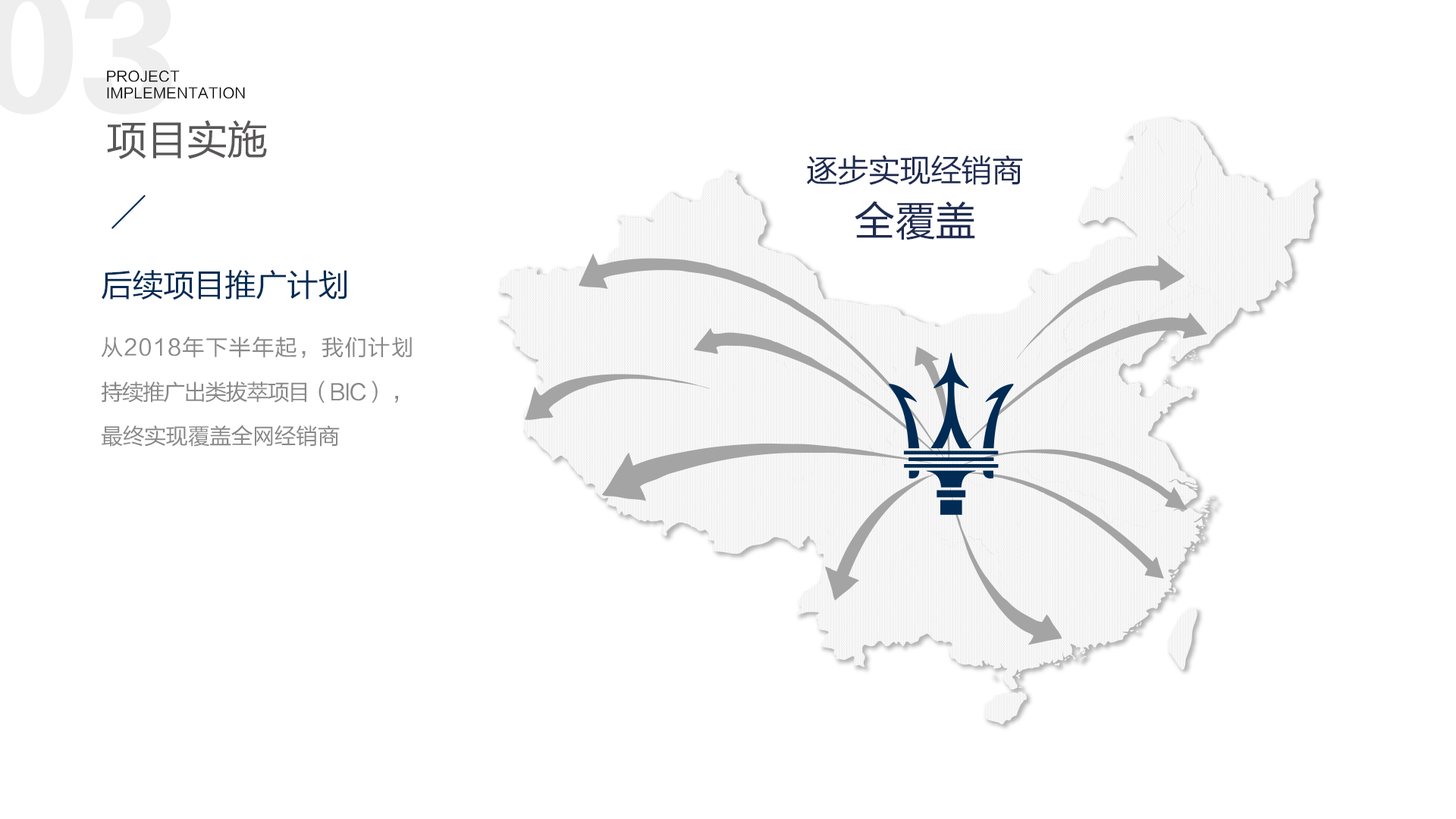
<style>
.page{position:relative;width:1456px;height:819px;background:#ffffff}
.page>*{position:absolute;margin:0}
.t1{font:14.1px "FZLTHJW--GB1-0";letter-spacing:0.02em;color:#000000}
.t2{font:41.1px "FZLTHJW--GB1-0";letter-spacing:-0.02em;color:#595757}
.t3{font:31.6px/53.7px "FZLTHJW--GB1-0";letter-spacing:-0.02em;color:#1f2b51}
.t4{font:41.1px/53.7px "FZLTHJW--GB1-0";letter-spacing:-0.02em;color:#1f2b51}
.t5{font:31.6px "FZLTHJW--GB1-0";letter-spacing:-0.02em;color:#002c54}
.t6{font:22.1px/44.2px "FZLTHJW--GB1-0";letter-spacing:-0.02em;color:#888888}
.t7{font:22.1px/44.2px "FZLTHJW--GB1-0";letter-spacing:-0.06em;color:#888888}
</style>
<div class="page">
<p class="t1" style="left:107px;top:70px;width:138px;height:29px">PROJECT <br>IMPLEMENTATION</p>
<p class="t2" style="left:107px;top:120px;width:160px;height:39px">项目实施</p>
<p class="t3" style="left:807px;top:155px;width:216px;height:85px;text-align:center">逐步实现经销商<br><span class="t4">全覆盖</span></p>
<p class="t5" style="left:102px;top:269px;width:245px;height:31px">后续项目推广计划</p>
<p class="t6" style="left:101px;top:337px;width:311px;height:110px;text-align:justify">从2018年下半年起，我们计划<span class="t7">持续推广出类拔萃项目（BIC）</span> ，最终实现覆盖全网经销商</p>
</div>
